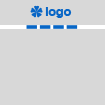
<style>
.page{position:relative;width:105px;height:105px;background:#d8d8d8}
.page>*{position:absolute;margin:0}
.t1{font:12.8px "HelveticaNeue-Bold";letter-spacing:-0.02em;color:#0866c6}
</style>
<div class="page">
<p class="t1" style="left:45px;top:7px;width:27px;height:11px">logo</p>
</div>
